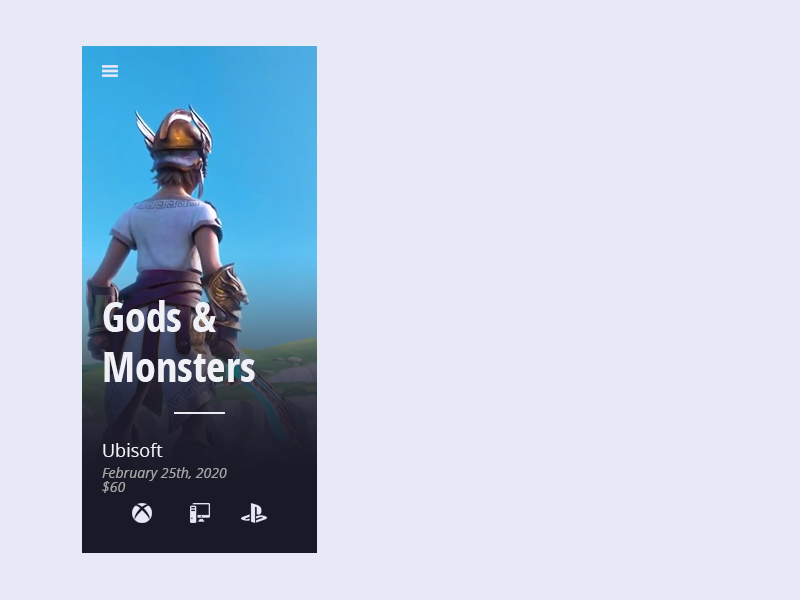
<style>
.page{position:relative;width:800px;height:600px;background:#e8e9f7}
.page>*{position:absolute;margin:0}
.t1{font:42px "OpenSansCondensed-Bold";color:#f0f1f7}
.t2{font:18px "OpenSans-Regular";color:#f0f1f7}
.t3{font:14px "OpenSans-Italic";color:#a4a4a4}
</style>
<div class="page">
<p class="t1" style="left:103px;top:300px;width:152px;height:82px">Gods &amp; Monsters</p>
<p class="t2" style="left:103px;top:443px;width:60px;height:14px">Ubisoft</p>
<p class="t3" style="left:102px;top:467px;width:125px;height:14px">February 25th, 2020</p>
<p class="t3" style="left:102px;top:481px;width:24px;height:12px">$60</p>
</div>
